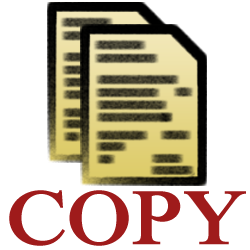
<style>
.page{position:relative;width:250px;height:250px;background:#ffffff}
.page>*{position:absolute;margin:0}
.t1{font:80px "IskoolaPota-Bold";color:#9f1b1b}
</style>
<div class="page">
<p class="t1" style="left:9px;top:190px;width:237px;height:56px">COPY</p>
</div>
